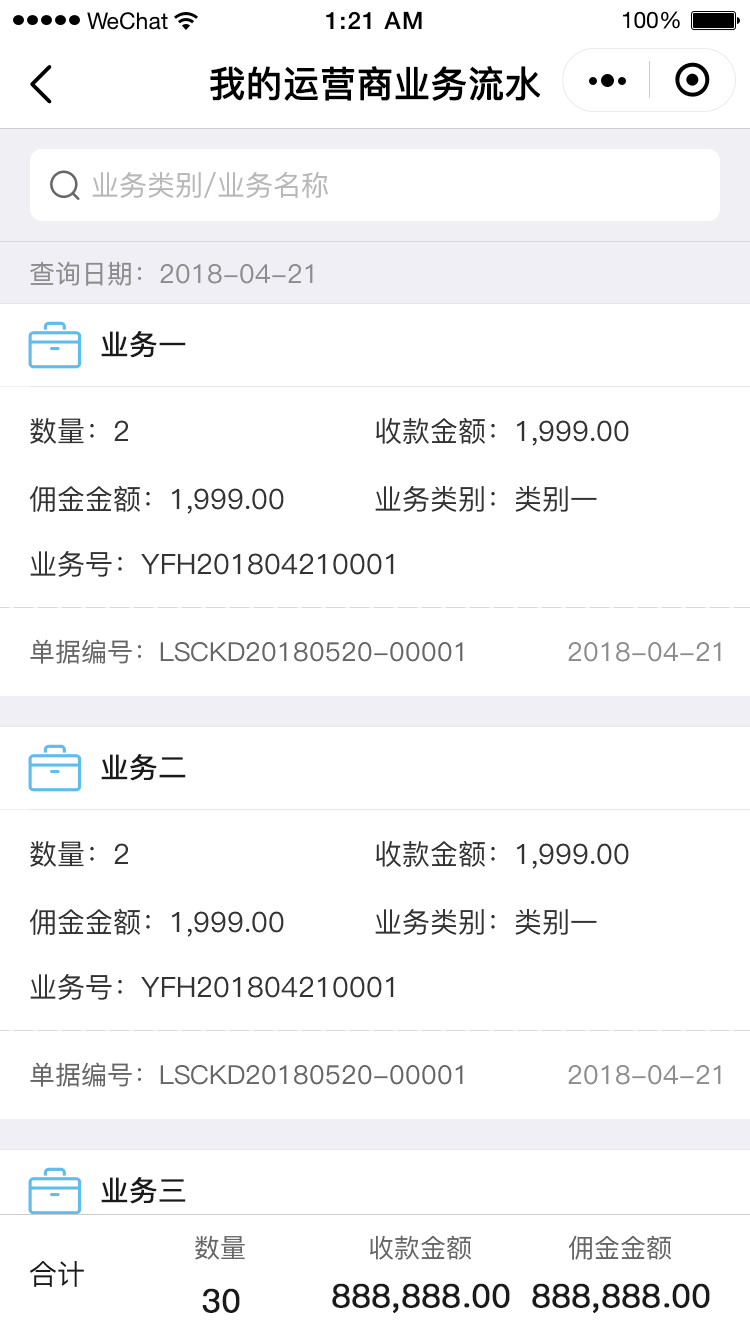
<style>
.page{position:relative;width:750px;height:1334px;background:#ffffff}
.page>*{position:absolute;margin:0}
.t1{font:36px "PingFang-SC-Medium";color:#000000;font-weight:bold}
.t2{font:28px "PingFang-SC-Medium";color:#b8b8b8}
.t3{font:26px "PingFang-SC-Medium";color:#8c8c8c}
.t4{font:28px "PingFang-SC-Medium";color:#1a1a1a;font-weight:bold}
.t5{font:28px "PingFang-SC-Medium";color:#333333}
.t6{font:26px "PingFang-SC-Medium";color:#666666}
.t7{font:28px "PingFang-SC-Medium";color:#1a1a1a}
.t8{font:32px "PingFang-SC-Medium";color:#1a1a1a;font-weight:bold}
</style>
<div class="page">
<p class="t1" style="left:210px;top:66px;width:330px;height:35px">我的运营商业务流水</p>
<p class="t2" style="left:92px;top:172px;width:236px;height:26px">业务类别/业务名称</p>
<p class="t3" style="left:30px;top:261px;width:283px;height:25px">查询日期：2018-04-21</p>
<p class="t4" style="left:101px;top:331px;width:85px;height:27px">业务一</p>
<p class="t5" style="left:30px;top:418px;width:98px;height:26px">数量：2</p>
<p class="t5" style="left:376px;top:418px;width:253px;height:28px">收款金额：1,999.00</p>
<p class="t5" style="left:30px;top:486px;width:254px;height:28px">佣金金额：1,999.00</p>
<p class="t5" style="left:375px;top:486px;width:222px;height:26px">业务类别：类别一</p>
<p class="t5" style="left:30px;top:551px;width:364px;height:26px">业务号：YFH201804210001</p>
<p class="t6" style="left:30px;top:639px;width:433px;height:25px">单据编号：LSCKD20180520-00001</p>
<p class="t3" style="left:568px;top:642px;width:153px;height:20px">2018-04-21</p>
<p class="t4" style="left:101px;top:754px;width:85px;height:27px">业务二</p>
<p class="t5" style="left:30px;top:841px;width:98px;height:26px">数量：2</p>
<p class="t5" style="left:376px;top:841px;width:253px;height:28px">收款金额：1,999.00</p>
<p class="t5" style="left:30px;top:909px;width:254px;height:28px">佣金金额：1,999.00</p>
<p class="t5" style="left:375px;top:909px;width:222px;height:26px">业务类别：类别一</p>
<p class="t5" style="left:30px;top:974px;width:364px;height:26px">业务号：YFH201804210001</p>
<p class="t6" style="left:30px;top:1062px;width:433px;height:25px">单据编号：LSCKD20180520-00001</p>
<p class="t3" style="left:568px;top:1065px;width:153px;height:20px">2018-04-21</p>
<p class="t4" style="left:101px;top:1177px;width:85px;height:27px">业务三</p>
<p class="t6" style="left:195px;top:1235px;width:50px;height:25px">数量</p>
<p class="t6" style="left:370px;top:1235px;width:102px;height:25px">收款金额</p>
<p class="t6" style="left:568px;top:1235px;width:104px;height:25px">佣金金额</p>
<p class="t7" style="left:30px;top:1261px;width:54px;height:26px">合计</p>
<p class="t8" style="left:202px;top:1288px;width:38px;height:25px">30</p>
<p class="t8" style="left:332px;top:1283px;width:178px;height:30px">888,888.00</p>
<p class="t8" style="left:532px;top:1283px;width:178px;height:30px">888,888.00</p>
</div>
